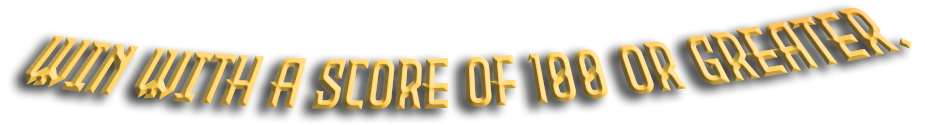
<style>
.page{position:relative;width:925px;height:125px;background:#ffffff}
.page>*{position:absolute;margin:0}
.t1{font:46.5px "EvilEmpire"}
</style>
<div class="page">
<p class="t1" style="left:25px;top:7px;width:886px;height:102px;rotate:-2deg">Win with a score of 100 or greater.</p>
</div>
